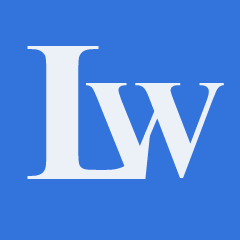
<style>
.page{position:relative;width:240px;height:240px;background:#3373dc}
.page>*{position:absolute;margin:0}
.t1{font:200px "TimesNewRomanPS-BoldMT";color:#ecf0f7}
.t2{font:140px "TimesNewRomanPS-BoldMT";color:#ecf0f7}
</style>
<div class="page">
<p class="t1" style="left:27px;top:46px;width:124px;height:133px">L</p>
<p class="t2" style="left:86px;top:83px;width:138px;height:95px">W</p>
</div>
